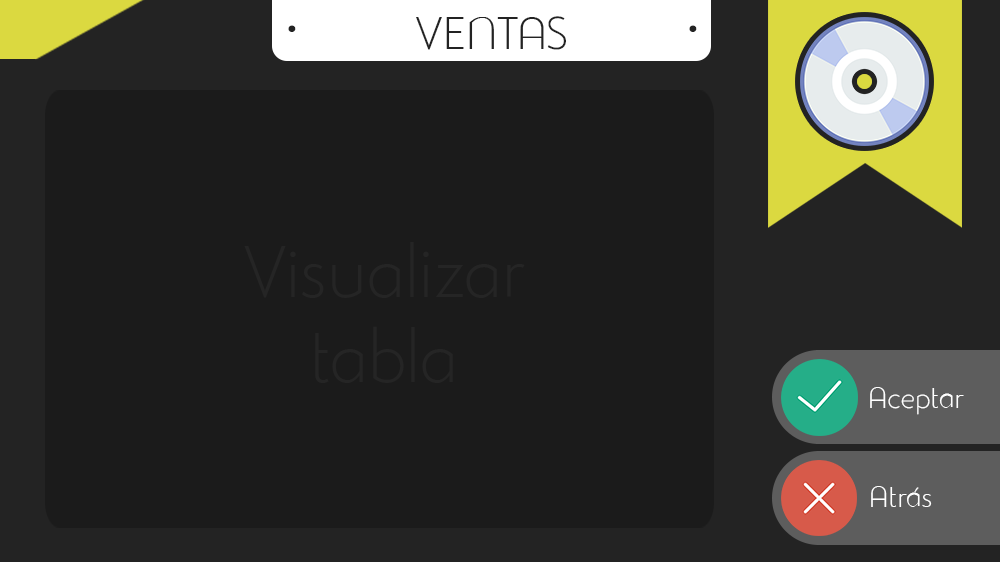
<style>
.page{position:relative;width:1000px;height:562px;background:#1b1b1b}
.page>*{position:absolute;margin:0}
.t1{font:45px "StudioGothicAlternateTrial-Extr";color:#232323}
.t2{font:97px "StudioGothicAlternateTrial-Extr";color:#232323}
.t3{font:71px "StudioGothicAlternateTrial-Extr";color:#252525}
.t4{font:29px "StudioGothicAlternateTrial-Extr";color:#ffffff}
</style>
<div class="page">
<p class="t1" style="left:416px;top:16px;width:150px;height:34px">VENTAS</p>
<p class="t2" style="left:288px;top:25px;width:409px;height:7px">·                 ·</p>
<p class="t3" style="left:244px;top:242px;width:281px;height:141px;text-align:center">Visualizar<br>tabla</p>
<p class="t4" style="left:870px;top:387px;width:94px;height:28px">Aceptar</p>
<p class="t4" style="left:871px;top:486px;width:61px;height:21px">Atrás</p>
</div>
